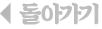
<style>
.page{position:relative;width:102px;height:29px;background:#ffffff}
.page>*{position:absolute;margin:0}
.t1{font:24.5px "SDKukdetopokki-bBd";letter-spacing:-0.06em;color:#bebebe}
.t2{font:24.5px "SDKukdetopokki-bBd";letter-spacing:-0.14em;color:#bebebe}
.t3{font:24.5px "SDKukdetopokki-bBd";letter-spacing:-0.16em;color:#bebebe}
.t4{font:24.5px "SDKukdetopokki-bBd";letter-spacing:-0.12em;color:#bebebe}
</style>
<div class="page">
<p class="t1" style="left:19px;top:2px;width:80px;height:23px">돌<span class="t2">아</span><span class="t3">가</span><span class="t4">기</span></p>
</div>
